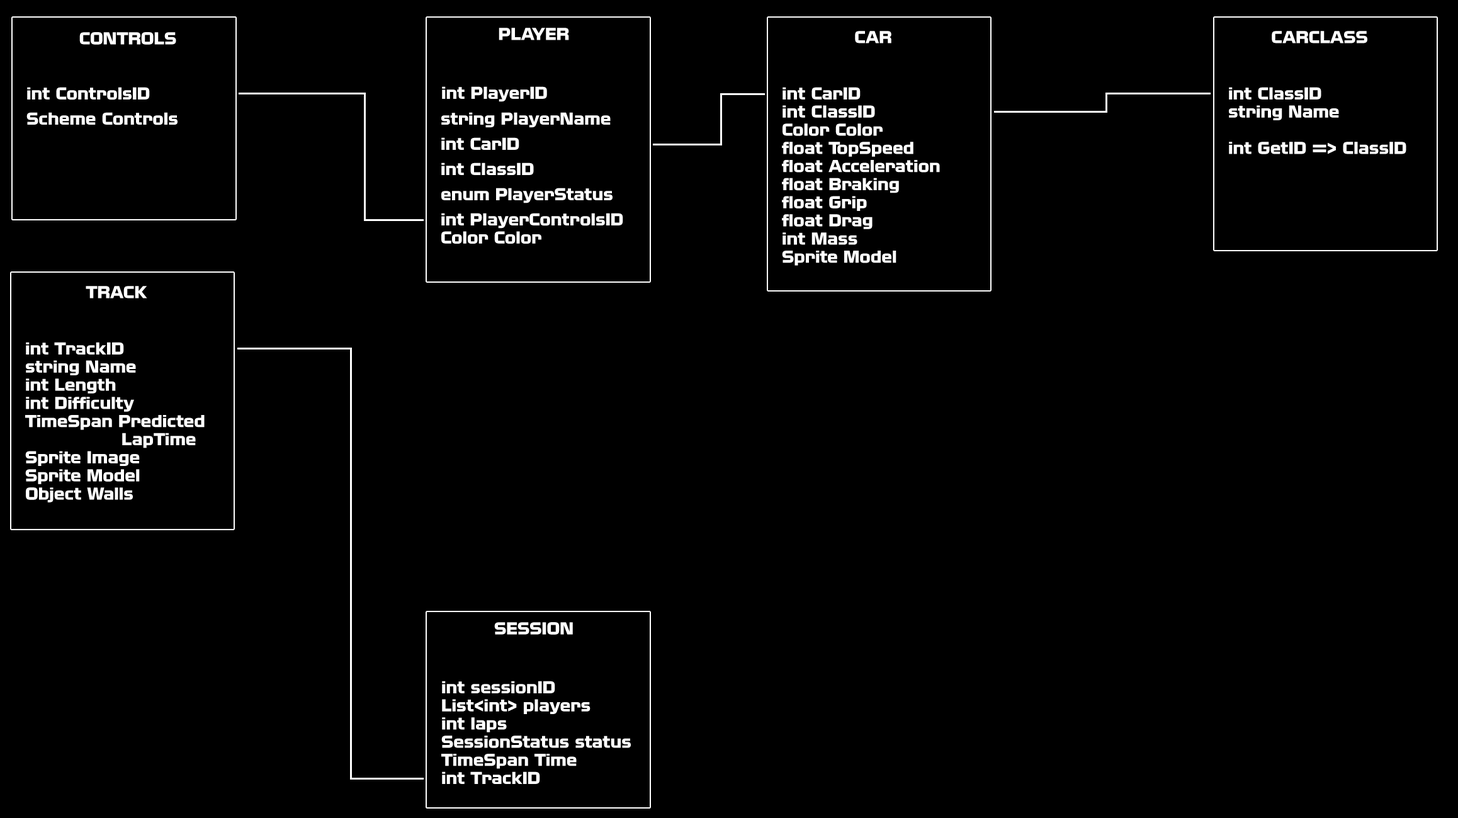
<style>
.page{position:relative;width:1458px;height:818px;background:#000000}
.page>*{position:absolute;margin:0}
.t1{font:15.1px "NissanOpti";color:#ffffff}
</style>
<div class="page">
<p class="t1" style="left:499px;top:28px;width:70px;height:12px">PLAYER</p>
<p class="t1" style="left:79px;top:32px;width:97px;height:13px">CONTROLS</p>
<p class="t1" style="left:855px;top:31px;width:36px;height:12px">CAR</p>
<p class="t1" style="left:1272px;top:31px;width:95px;height:12px">CARCLASS</p>
<p class="t1" style="left:27px;top:87px;width:123px;height:13px">int ControlsID</p>
<p class="t1" style="left:442px;top:86px;width:105px;height:16px">int PlayerID</p>
<p class="t1" style="left:782px;top:87px;width:158px;height:179px">int CarID<br>int ClassID<br>Color Color<br>float TopSpeed<br>float Acceleration<br>float Braking<br>float Grip<br>float Drag<br>int Mass<br>Sprite Model</p>
<p class="t1" style="left:1229px;top:87px;width:177px;height:67px">int ClassID<br>string Name<br><br>int GetID =&gt; ClassID</p>
<p class="t1" style="left:26px;top:112px;width:152px;height:13px">Scheme Controls</p>
<p class="t1" style="left:441px;top:112px;width:170px;height:16px">string PlayerName</p>
<p class="t1" style="left:441px;top:137px;width:78px;height:13px">int CarID</p>
<p class="t1" style="left:441px;top:162px;width:93px;height:13px">int ClassID</p>
<p class="t1" style="left:441px;top:188px;width:172px;height:15px">enum PlayerStatus</p>
<p class="t1" style="left:441px;top:213px;width:182px;height:31px">int PlayerControlsID<br>Color Color</p>
<p class="t1" style="left:86px;top:286px;width:61px;height:12px">TRACK</p>
<p class="t1" style="left:25px;top:342px;width:180px;height:160px">int TrackID<br>string Name<br>int Length<br>int Difficulty<br>TimeSpan Predicted<br>     LapTime<br>Sprite Image<br>Sprite Model<br>Object Walls</p>
<p class="t1" style="left:494px;top:622px;width:79px;height:13px">SESSION</p>
<p class="t1" style="left:441px;top:681px;width:190px;height:103px">int sessionID<br>List&lt;int&gt; players<br>int laps<br>SessionStatus status<br>TimeSpan Time<br>int TrackID</p>
</div>
